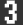
<style>
.page{position:relative;width:23px;height:25px;background:#333333}
.page>*{position:absolute;margin:0}
.t1{font:38.9px "VT323-Regular";color:#ffffff;font-weight:bold;scale:0.9 1}
</style>
<div class="page">
<p class="t1" style="left:4px;top:0px;width:13px;height:24px">3</p>
</div>
